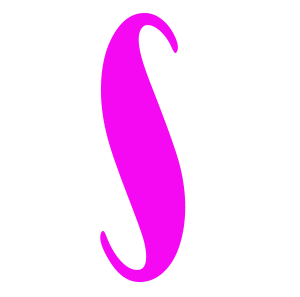
<style>
.page{position:relative;width:300px;height:297px;background:#ffffff}
.page>*{position:absolute;margin:0}
.t1{font:382.1px "Broadway";color:#f508f2;scale:0.42 1}
</style>
<div class="page">
<p class="t1" style="left:100px;top:12px;width:86px;height:270px">S</p>
</div>
